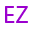
<style>
.page{position:relative;width:32px;height:32px;background:#ffffff}
.page>*{position:absolute;margin:0}
.t1{font:24px "MyriadPro-Regular";color:#9b00ce}
</style>
<div class="page">
<p class="t1" style="left:5px;top:6px;width:23px;height:17px">EZ</p>
</div>
